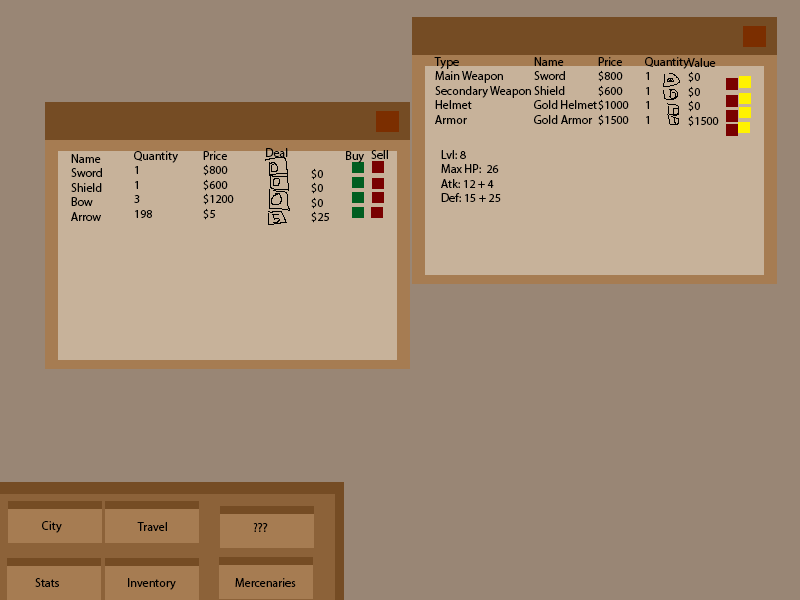
<style>
.page{position:relative;width:800px;height:600px;background:#998675}
.page>*{position:absolute;margin:0}
.t1{font:12px "MyriadPro-Regular";color:#000000}
</style>
<div class="page">
<p class="t1" style="left:434px;top:57px;width:97px;height:67px">Type<br>Main Weapon<br>Secondary Weapon<br>Helmet<br>Armor</p>
<p class="t1" style="left:534px;top:57px;width:63px;height:67px">Name<br>Sword<br>Shield<br>Gold Helmet<br>Gold Armor</p>
<p class="t1" style="left:598px;top:57px;width:31px;height:69px">Price<br>$800<br>$600<br>$1000<br>$1500</p>
<p class="t1" style="left:645px;top:57px;width:44px;height:67px">Quantity<br>1<br>1<br>1<br>1</p>
<p class="t1" style="left:688px;top:58px;width:31px;height:69px">Value<br>$0<br>$0<br>$0<br>$1500</p>
<p class="t1" style="left:266px;top:148px;width:22px;height:9px">Deal</p>
<p class="t1" style="left:371px;top:150px;width:17px;height:9px">Sell</p>
<p class="t1" style="left:441px;top:150px;width:60px;height:52px">Lvl: 8<br>Max HP:  26<br>Atk: 12 + 4<br>Def: 15 + 25</p>
<p class="t1" style="left:71px;top:154px;width:31px;height:67px">Name<br>Sword<br>Shield<br>Bow<br>Arrow</p>
<p class="t1" style="left:134px;top:151px;width:44px;height:67px">Quantity<br>1<br>1<br>3<br>198</p>
<p class="t1" style="left:203px;top:151px;width:31px;height:69px">Price<br>$800<br>$600<br>$1200<br>$5</p>
<p class="t1" style="left:346px;top:151px;width:18px;height:12px">Buy</p>
<p class="t1" style="left:311px;top:168px;width:18px;height:55px">$0<br>$0<br>$0<br>$25</p>
<p class="t1" style="left:42px;top:521px;width:20px;height:12px">City</p>
<p class="t1" style="left:137px;top:522px;width:30px;height:9px">Travel</p>
<p class="t1" style="left:253px;top:523px;width:15px;height:9px">???</p>
<p class="t1" style="left:35px;top:578px;width:24px;height:9px">Stats</p>
<p class="t1" style="left:128px;top:578px;width:48px;height:12px">Inventory</p>
<p class="t1" style="left:235px;top:578px;width:61px;height:9px">Mercenaries</p>
</div>
